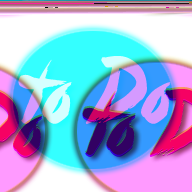
<style>
.page{position:relative;width:192px;height:192px}
.page>*{position:absolute;margin:0}
.t1{font:97.4px "AsylumMansion";scale:0.81 1}
</style>
<div class="page">
<p class="t1" style="left:18px;top:55px;width:153px;height:68px">to Do</p>
</div>
